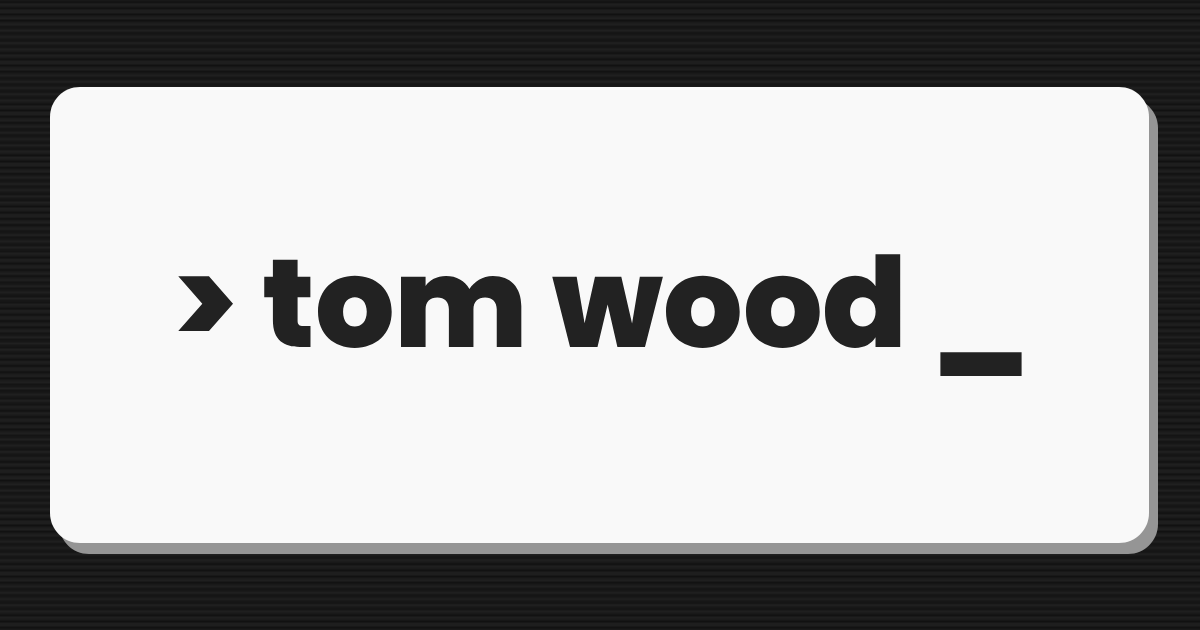
<style>
.page{position:relative;width:1200px;height:630px;background:#f9f9f9}
.page>*{position:absolute;margin:0}
.t1{font:125.3px "Poppins-ExtraBold";color:#222222}
</style>
<div class="page">
<p class="t1" style="left:178px;top:254px;width:844px;height:123px">&gt; tom wood _</p>
</div>
